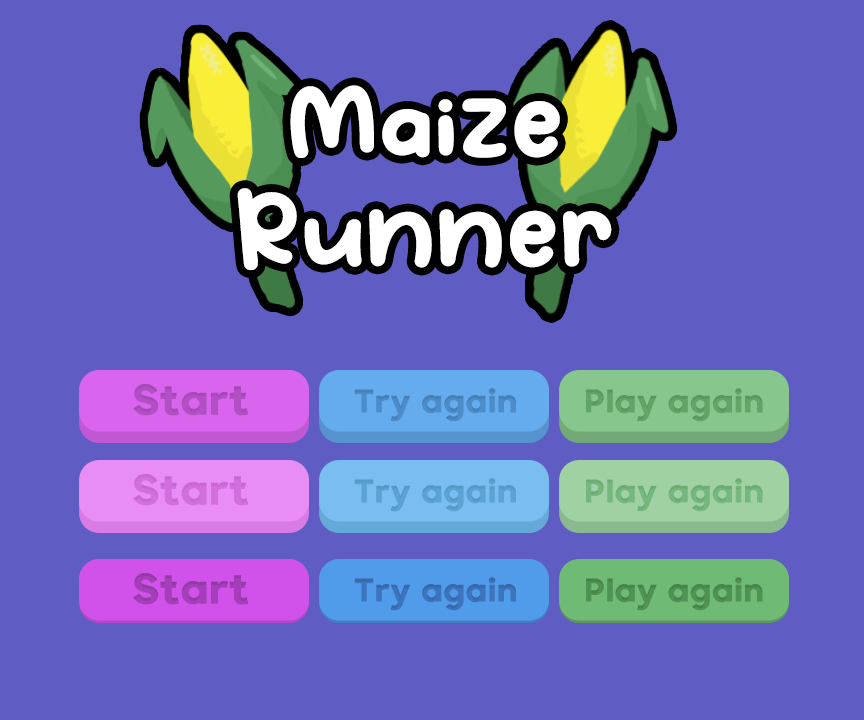
<style>
.page{position:relative;width:864px;height:720px;background:#5f5dc3}
.page>*{position:absolute;margin:0}
.t1{font:91.5px "Bodo-Amat";color:#ffffff;font-weight:bold}
.t2{font:41.4px "Retroica";color:#b34fc5;font-weight:bold}
.t3{font:32px "Retroica";color:#4b8cc9;font-weight:bold}
.t4{font:32px "Retroica";color:#62a568;font-weight:bold}
.t5{font:41.4px "Retroica";color:#d16fdc;font-weight:bold}
</style>
<div class="page">
<p class="t1" style="left:237px;top:85px;width:375px;height:186px;text-align:center">Maize<br>Runner</p>
<p class="t2" style="left:133px;top:384px;width:115px;height:32px">Start</p>
<p class="t3" style="left:354px;top:388px;width:162px;height:34px">Try again</p>
<p class="t4" style="left:586px;top:388px;width:177px;height:34px">Play again</p>
<p class="t5" style="left:133px;top:474px;width:115px;height:32px">Start</p>
<p class="t3" style="left:354px;top:478px;width:162px;height:34px">Try again</p>
<p class="t4" style="left:586px;top:478px;width:177px;height:34px">Play again</p>
<p class="t2" style="left:133px;top:573px;width:115px;height:32px">Start</p>
<p class="t3" style="left:354px;top:577px;width:162px;height:34px">Try again</p>
<p class="t4" style="left:586px;top:577px;width:177px;height:34px">Play again</p>
</div>
